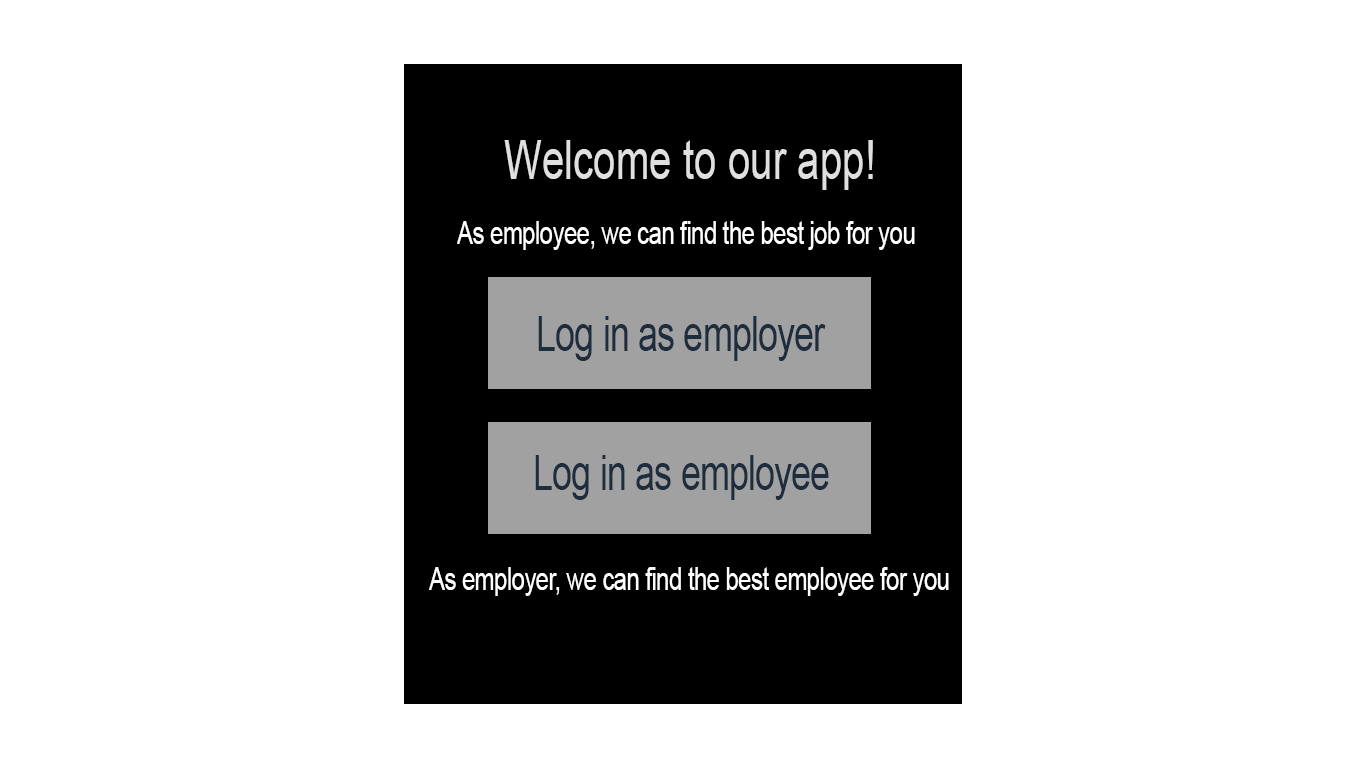
<style>
.page{position:relative;width:1366px;height:768px;background:#ffffff}
.page>*{position:absolute;margin:0}
.t1{font:53.7px "ArialMT";color:#e0e0e0;scale:0.75 1}
.t2{font:32px "ArialMT";letter-spacing:-0.025em;color:#ffffff;scale:0.75 1}
.t3{font:48px "ArialMT";letter-spacing:-0.025em;color:#1e2d3e;scale:0.75 1}
</style>
<div class="page">
<p class="t1" style="left:504px;top:140px;width:369px;height:50px">Welcome to our app!</p>
<p class="t2" style="left:457px;top:221px;width:458px;height:29px">As employee, we can find the best job for you</p>
<p class="t3" style="left:538px;top:316px;width:288px;height:45px">Log in as employer</p>
<p class="t3" style="left:535px;top:455px;width:294px;height:45px">Log in as employee</p>
<p class="t2" style="left:429px;top:567px;width:520px;height:29px">As employer, we can find the best employee for you</p>
</div>
